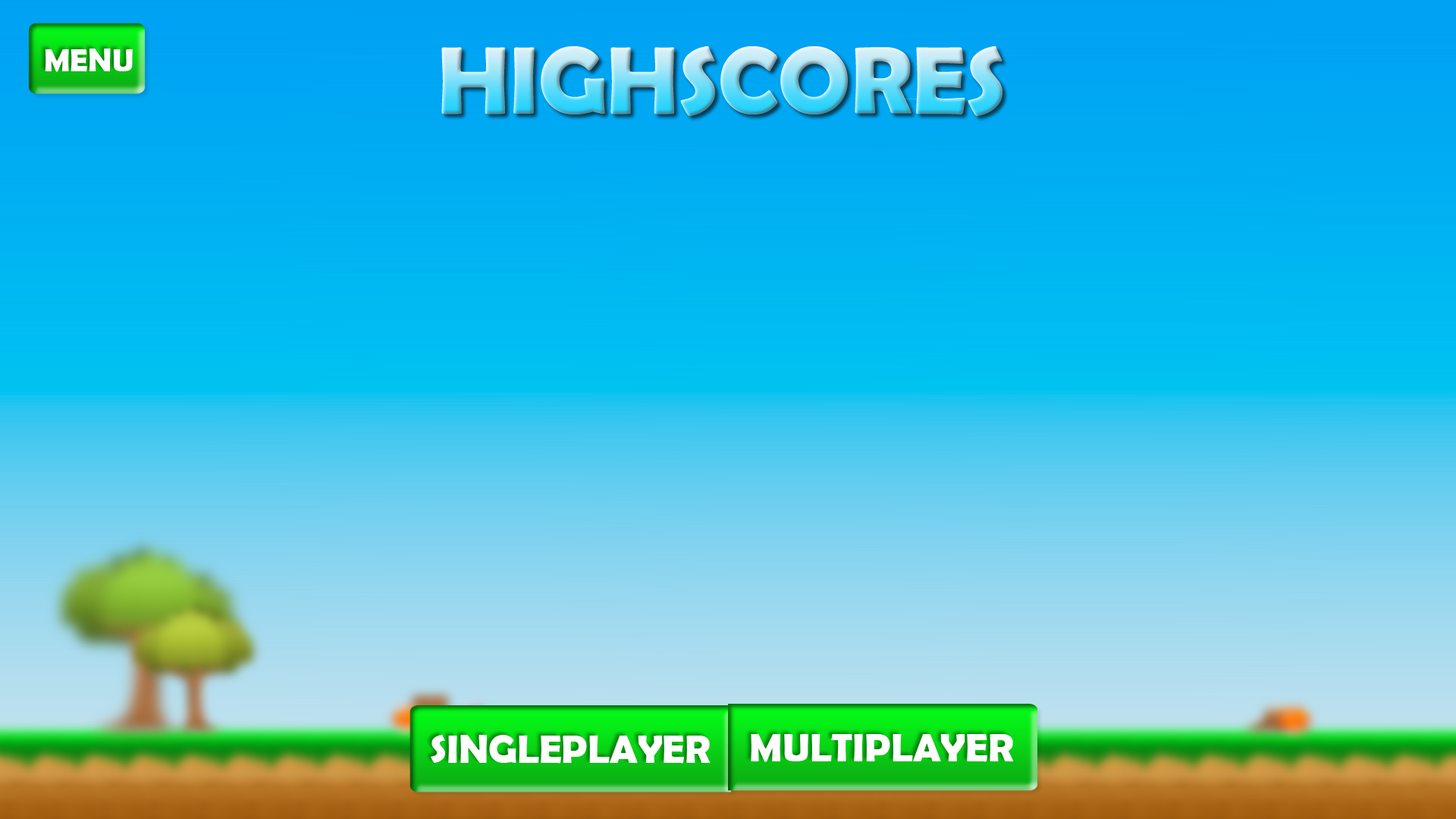
<style>
.page{position:relative;width:1456px;height:819px}
.page>*{position:absolute;margin:0}
.t1{font:32.1px "BerlinSansFBDemi-Bold";color:#ffffff}
.t2{font:96.3px "BerlinSansFBDemi-Bold"}
.t3{font:40.1px "BerlinSansFBDemi-Bold";color:#ffffff}
</style>
<div class="page">
<p class="t1" style="left:45px;top:49px;width:88px;height:23px">MENU</p>
<p class="t2" style="left:441px;top:46px;width:562px;height:70px">HIGHSCORES</p>
<p class="t3" style="left:431px;top:735px;width:280px;height:29px">SINGLEPLAYER</p>
<p class="t3" style="left:751px;top:734px;width:263px;height:28px">MULTIPLAYER</p>
</div>
